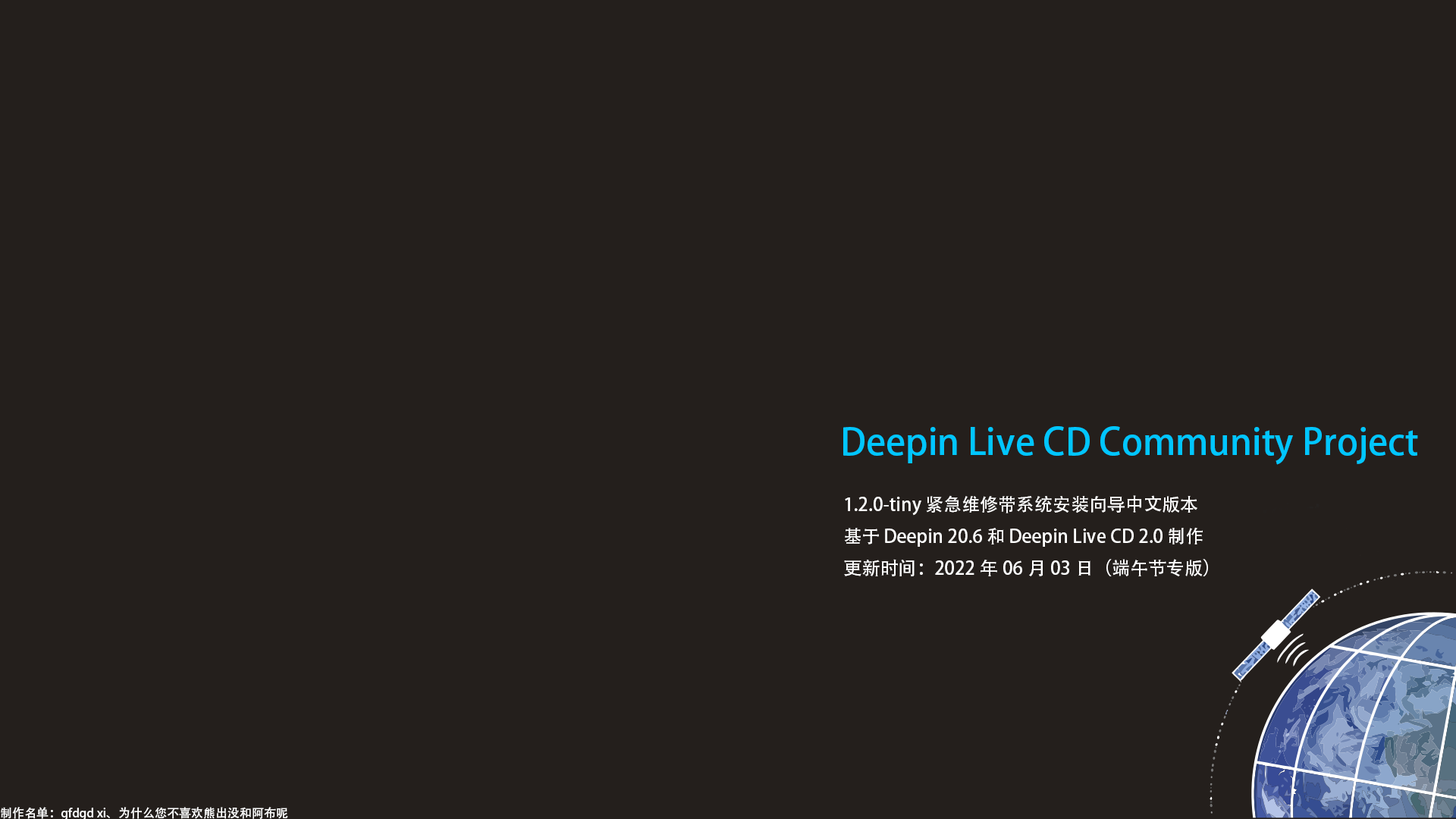
<style>
.page{position:relative;width:1456px;height:819px;background:#241f1c}
.page>*{position:absolute;margin:0}
.t1{font:36.4px "AdobeHeitiStd-Regular";color:#00c6ff}
.t2{font:18.2px "AdobeHeitiStd-Regular";color:#ffffff}
.t3{font:12.1px "AdobeHeitiStd-Regular";color:#ffffff}
</style>
<div class="page">
<p class="t1" style="left:843px;top:426px;width:575px;height:39px">Deepin Live CD Community Project</p>
<p class="t2" style="left:844px;top:495px;width:364px;height:82px">1.2.0-tiny 紧急维修带系统安装向导中文版本<br>基于 Deepin 20.6 和 Deepin Live CD 2.0 制作<br>更新时间：2022年06月03日（端午节专版）</p>
<p class="t3" style="left:1px;top:807px;width:287px;height:14px">制作名单：gfdgd xi、为什么您不喜欢熊出没和阿布呢</p>
</div>
